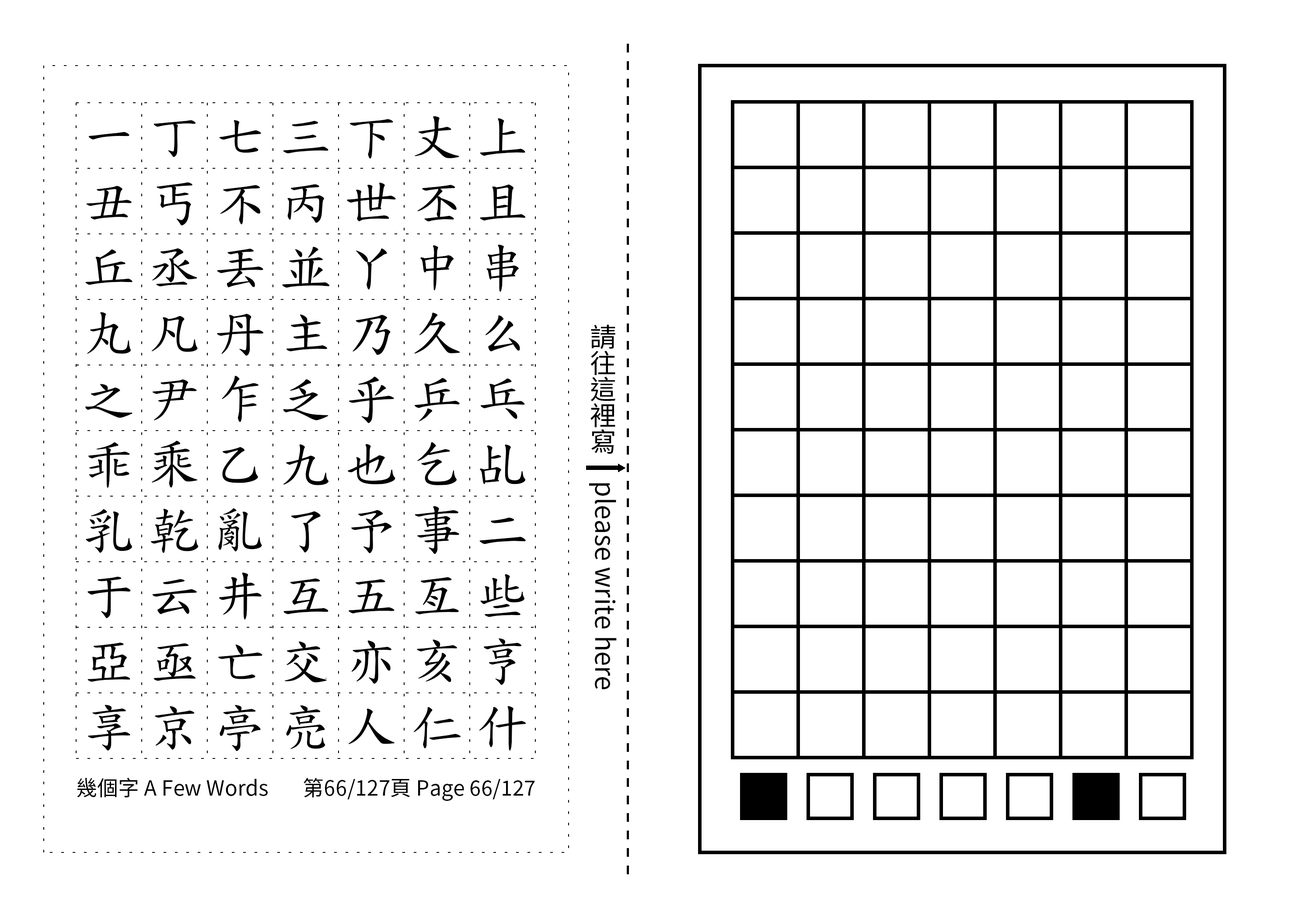
<style>
.page{position:relative;width:1299px;height:918px;background:#ffffff}
.page>*{position:absolute;margin:0}
.t1{font:52.5px/65.6px "TW-Kai-98_1";letter-spacing:0.25em;color:#000000}
.t2{font:26.2px "SourceHanSansTC-Regular";color:#000000}
.t3{font:21px "SourceHanSansTC-Regular";color:#000000}
</style>
<div class="page">
<p class="t1" style="left:85px;top:116px;width:441px;height:636px;text-align:center">一丁七三下丈上丑丐不丙世丕且丘丞丟並丫中串丸凡丹主乃久么之尹乍乏乎乒乓乖乘乙九也乞乩乳乾亂了予事二于云井互五亙些亞亟亡交亦亥亨享京亭亮人仁什</p>
<p class="t2" style="left:589px;top:324px;width:28px;height:366px;text-align:center">請往這裡寫　please write here</p>
<p class="t3" style="left:77px;top:778px;width:191px;height:20px">幾個字 A Few Words</p>
<p class="t3" style="left:303px;top:778px;width:232px;height:23px">第66/127頁 Page 66/127</p>
</div>
